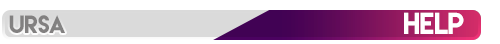
<style>
.page{position:relative;width:500px;height:44px;background:#ffffff}
.page>*{position:absolute;margin:0}
.t1{font:22.4px "LemonMilk";letter-spacing:-0.02em;color:#7b7b7b}
.t2{font:27.1px "LemonMilk";letter-spacing:-0.02em;color:#ffffff}
</style>
<div class="page">
<p class="t1" style="left:9px;top:15px;width:56px;height:18px">URSA</p>
<p class="t2" style="left:404px;top:12px;width:60px;height:22px">help</p>
</div>
